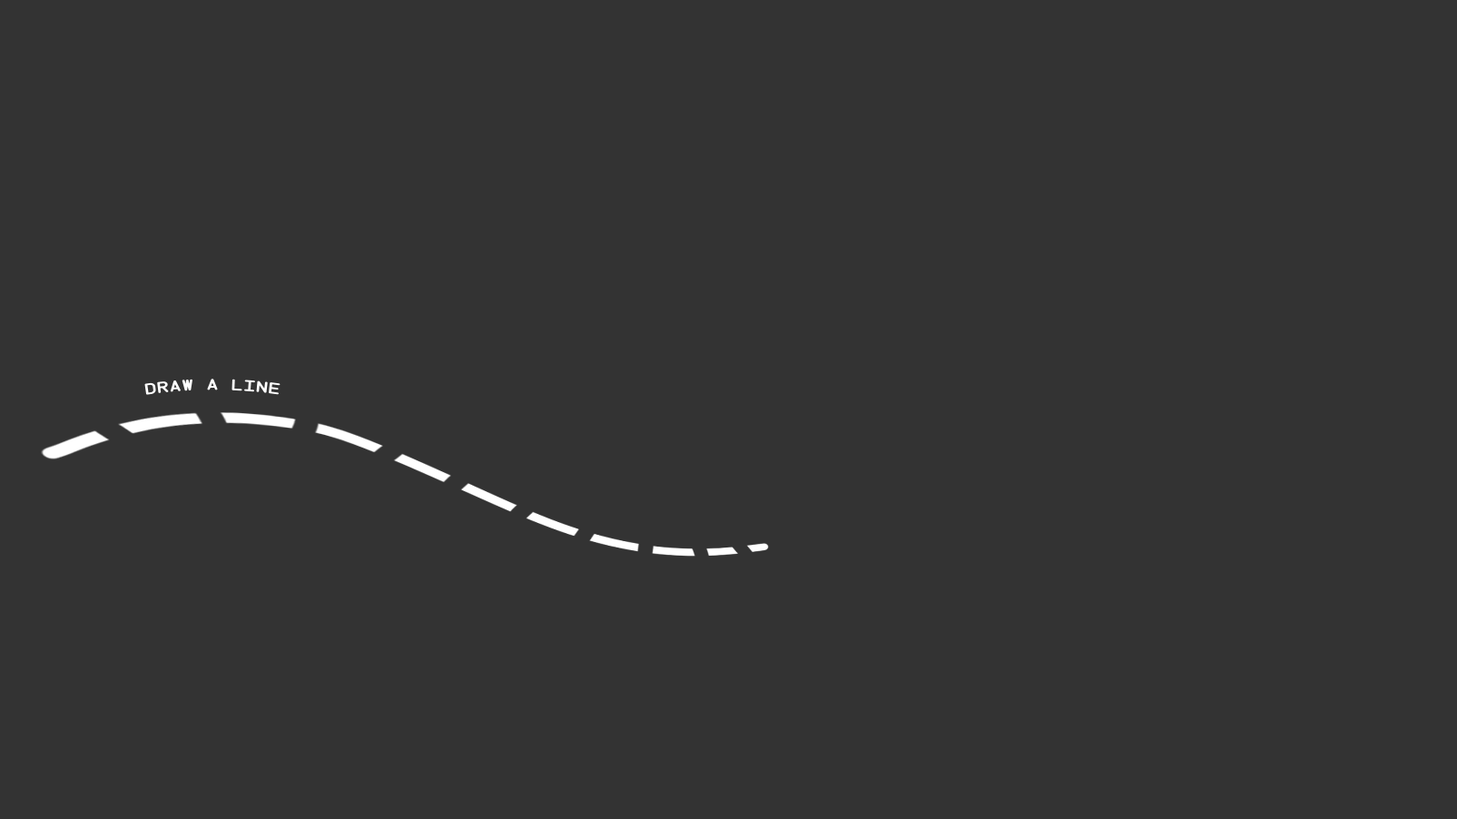
<style>
.page{position:relative;width:1457px;height:819px;background:#333333}
.page>*{position:absolute;margin:0}
.t1{font:14.5px "Instruction-Bold";letter-spacing:0.05em;color:#ffffff}
</style>
<div class="page">
<p class="t1" style="left:144px;top:378px;width:136px;height:17px">Draw a line</p>
</div>
